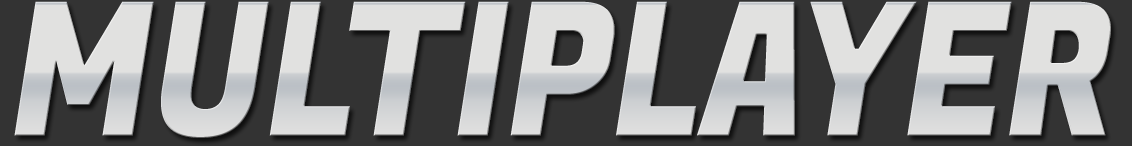
<style>
.page{position:relative;width:1132px;height:146px;background:#333333}
.page>*{position:absolute;margin:0}
.t1{font:185.2px "FugazOne-Regular";color:#dfdfdf;scale:0.89 1}
</style>
<div class="page">
<p class="t1" style="left:14px;top:1px;width:1097px;height:137px">MULTIPLAYER</p>
</div>
